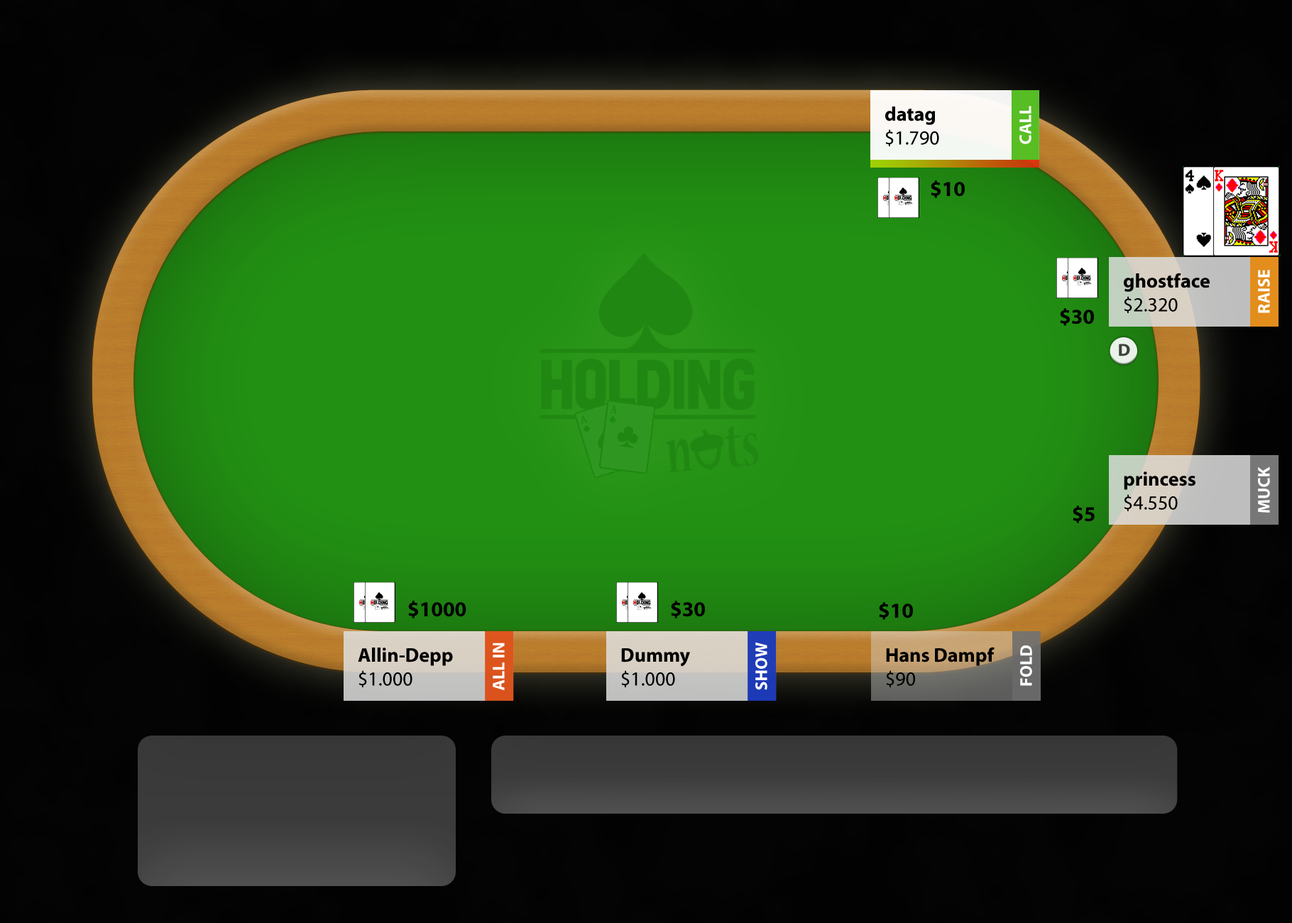
<style>
.page{position:relative;width:1292px;height:923px}
.page>*{position:absolute;margin:0}
.t1{font:19.9px "MyriadPro-Regular";color:#000000}
.t2{font:19.9px "MyriadPro-Bold";color:#000000}
.t3{font:17px "MyriadPro-Bold";color:#ffffff}
.t4{font:21.3px "MyriadPro-Bold";color:#000000}
.t5{font:17.3px "MyriadPro-Bold";color:#3f413e;scale:1.05 1}
</style>
<div class="page">
<p class="t1" style="left:885px;top:106px;width:54px;height:40px"><span class="t2">datag<br></span>$1.790</p>
<p class="t3" style="left:1019px;top:106px;width:13px;height:38px;rotate:-90deg">CALL</p>
<p class="t4" style="left:931px;top:180px;width:34px;height:18px">$10</p>
<p class="t3" style="left:1258px;top:270px;width:12px;height:43px;rotate:-90deg">RAISE</p>
<p class="t2" style="left:1124px;top:273px;width:86px;height:40px">ghostface<br><span class="t1">$2.320</span></p>
<p class="t4" style="left:1060px;top:308px;width:34px;height:18px">$30</p>
<p class="t5" style="left:1119px;top:344px;width:11px;height:12px">D</p>
<p class="t2" style="left:1124px;top:471px;width:72px;height:40px">princess<br><span class="t1">$4.550</span></p>
<p class="t3" style="left:1258px;top:466px;width:12px;height:47px;rotate:-90deg">MUCK</p>
<p class="t4" style="left:1073px;top:505px;width:22px;height:18px">$5</p>
<p class="t4" style="left:408px;top:601px;width:58px;height:17px">$1000</p>
<p class="t4" style="left:671px;top:601px;width:34px;height:17px">$30</p>
<p class="t4" style="left:879px;top:602px;width:34px;height:18px">$10</p>
<p class="t3" style="left:755px;top:642px;width:12px;height:48px;rotate:-90deg">SHOW</p>
<p class="t2" style="left:358px;top:647px;width:95px;height:40px">Allin-Depp<br><span class="t1">$1.000</span></p>
<p class="t3" style="left:493px;top:642px;width:12px;height:49px;rotate:-90deg">ALL IN</p>
<p class="t1" style="left:621px;top:648px;width:69px;height:39px"><span class="t2">Dummy<br></span>$1.000</p>
<p class="t2" style="left:886px;top:647px;width:109px;height:40px">Hans Dampf<br><span class="t1">$90</span></p>
<p class="t3" style="left:1020px;top:645px;width:12px;height:41px;rotate:-90deg">FOLD</p>
</div>
